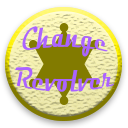
<style>
.page{position:relative;width:128px;height:128px;background:#ffffff}
.page>*{position:absolute;margin:0}
.t1{font:20.8px "Magneto-Bold";color:#ac63ff}
</style>
<div class="page">
<p class="t1" style="left:14px;top:26px;width:101px;height:66px;text-align:center">Change<br>Revolver</p>
</div>
